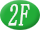
<style>
.page{position:relative;width:40px;height:30px;background:#22ac38}
.page>*{position:absolute;margin:0}
.t1{font:31.6px "LiSu";letter-spacing:0.06em;color:#f2f7f3;font-weight:bold;font-style:italic;scale:0.58 1}
</style>
<div class="page">
<p class="t1" style="left:8px;top:4px;width:22px;height:22px">2F</p>
</div>
